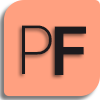
<style>
.page{position:relative;width:100px;height:100px;background:#ffa080}
.page>*{position:absolute;margin:0}
.t1{font:66.7px "Inter-ExtraLight";color:#1c1a1d}
.t2{font:66.7px "Inter-SemiBold";color:#1c1a1d}
</style>
<div class="page">
<p class="t1" style="left:22px;top:25px;width:30px;height:49px">P</p>
<p class="t2" style="left:54px;top:26px;width:32px;height:49px">F</p>
</div>
